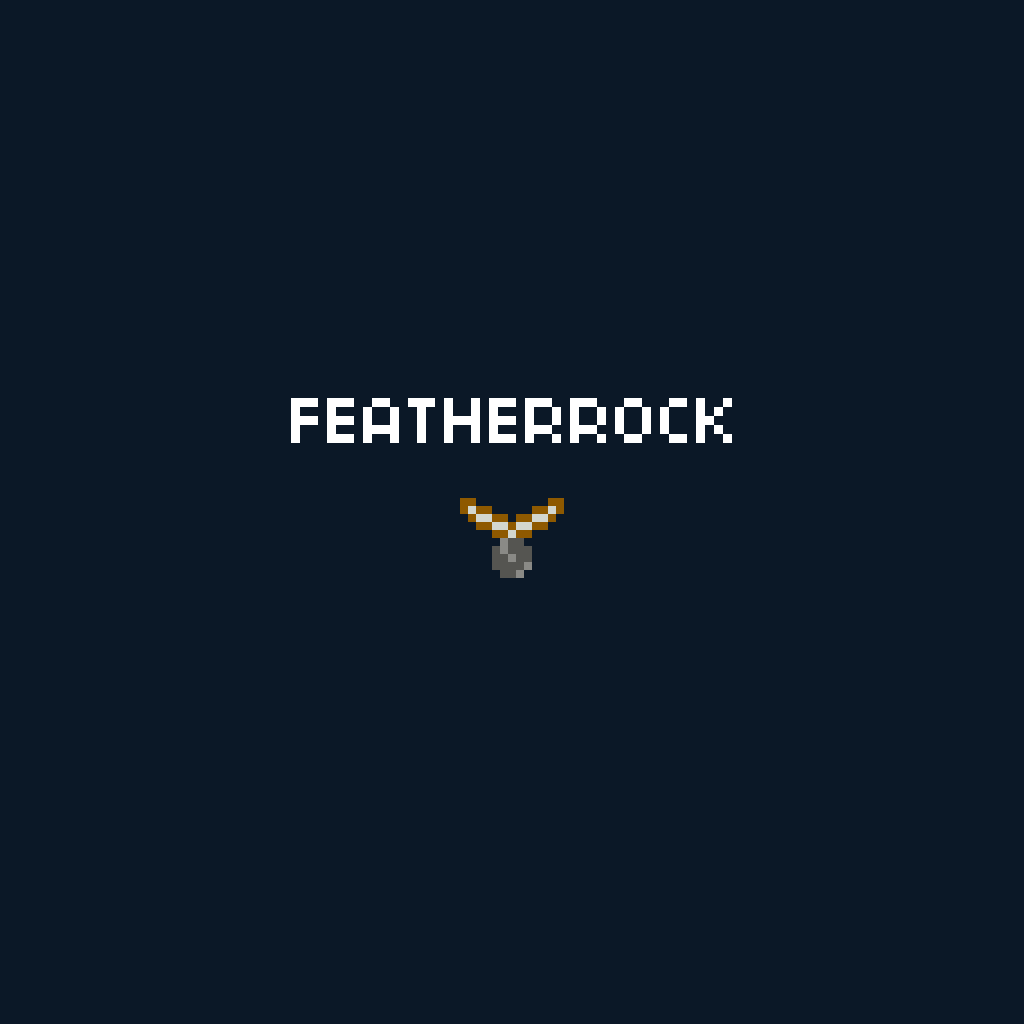
<style>
.page{position:relative;width:1024px;height:1024px;background:#0b1827}
.page>*{position:absolute;margin:0}
.t1{font:72px "04b03";color:#ffffff}
</style>
<div class="page">
<p class="t1" style="left:291px;top:398px;width:441px;height:45px">FEATHERROCK</p>
</div>
